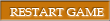
<style>
.page{position:relative;width:110px;height:21px;background:#c77408}
.page>*{position:absolute;margin:0}
.t1{font:12px "BookAntiqua";color:#ffffff}
</style>
<div class="page">
<p class="t1" style="left:10px;top:8px;width:94px;height:8px">RESTART GAME</p>
</div>
